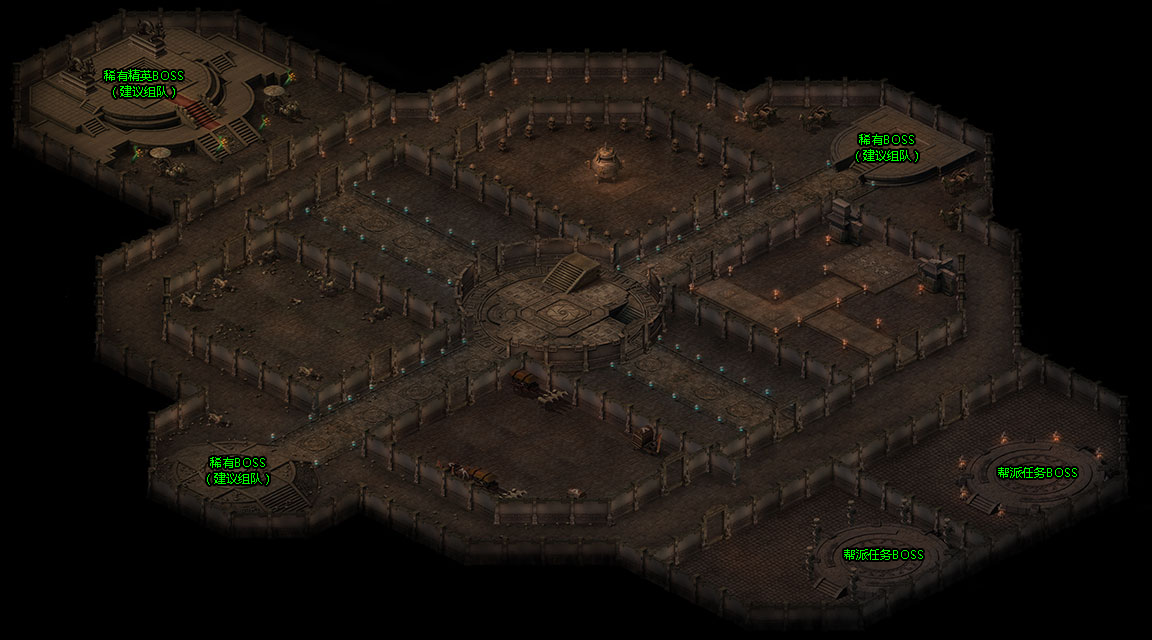
<style>
.page{position:relative;width:1152px;height:640px;background:#000000}
.page>*{position:absolute;margin:0}
.t1{font:12px/16px "MicrosoftYaHei";color:#00ff00}
.t2{font:12px "MicrosoftYaHei";color:#00ff00}
</style>
<div class="page">
<p class="t1" style="left:104px;top:69px;width:79px;height:29px;text-align:center">稀有精英BOSS<br>（建议组队）</p>
<p class="t1" style="left:856px;top:134px;width:62px;height:28px;text-align:center">稀有BOSS<br>（建议组队）</p>
<p class="t1" style="left:207px;top:457px;width:62px;height:28px;text-align:center">稀有BOSS<br>（建议组队）</p>
<p class="t2" style="left:998px;top:467px;width:79px;height:11px">帮派任务BOSS</p>
<p class="t2" style="left:844px;top:549px;width:79px;height:11px">帮派任务BOSS</p>
</div>
